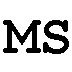
<style>
.page{position:relative;width:72px;height:72px;background:#ffffff}
.page>*{position:absolute;margin:0}
.t1{font:55.6px "CourierNewPS-BoldMT";color:#000000}
</style>
<div class="page">
<p class="t1" style="left:3px;top:20px;width:66px;height:34px">MS</p>
</div>
